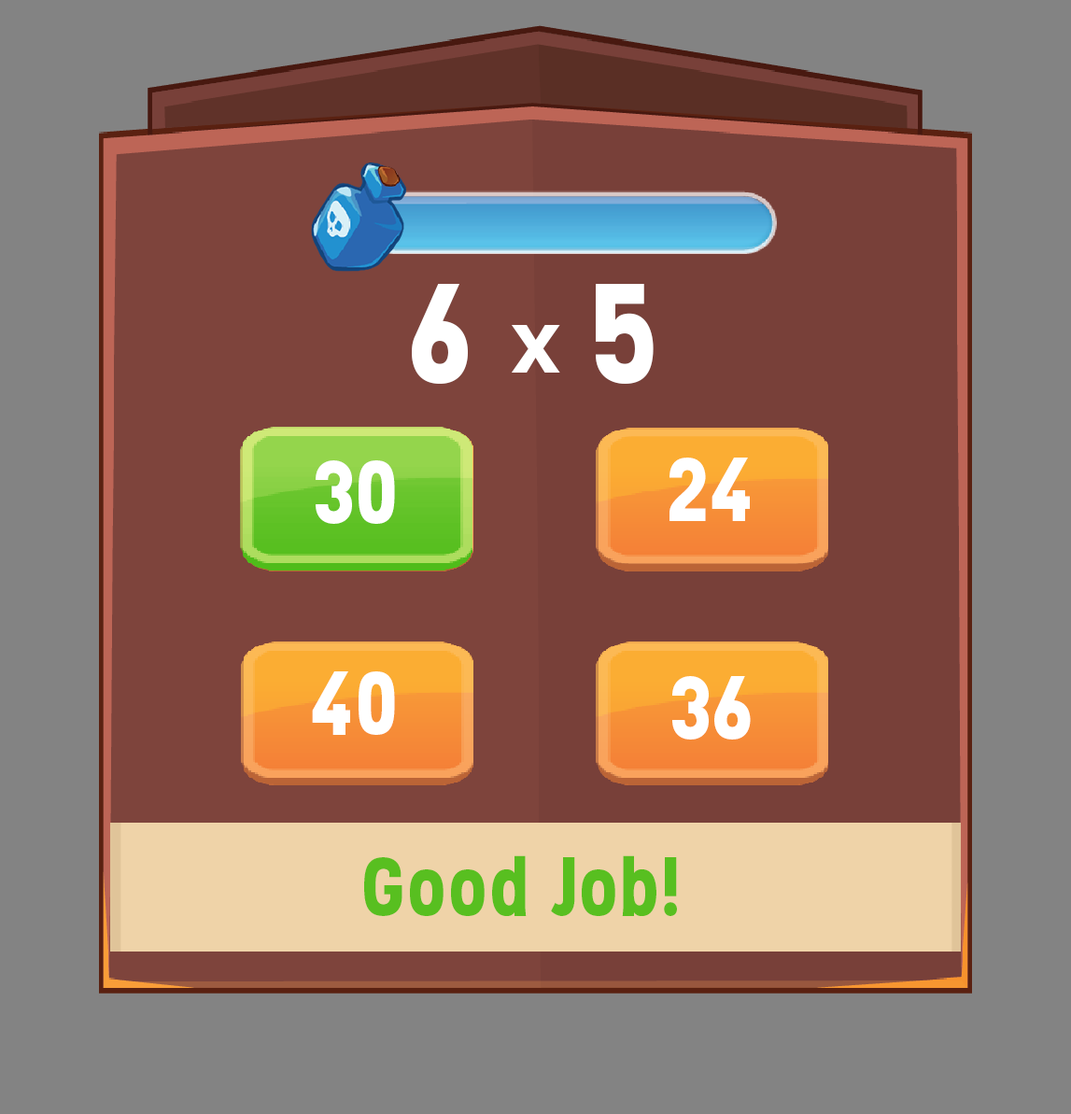
<style>
.page{position:relative;width:1071px;height:1114px;background:#838383}
.page>*{position:absolute;margin:0}
.t1{font:141.3px "Stellar-Bold";color:#ffffff}
.t2{font:86.5px "Stellar-Bold";color:#ffffff;scale:1.12 1}
.t3{font:90.2px "Stellar-Bold";color:#ffffff}
.t4{font:83.5px "Stellar-Bold";color:#58bf20}
</style>
<div class="page">
<p class="t1" style="left:412px;top:284px;width:241px;height:100px">6 <span class="t2">x </span>5</p>
<p class="t3" style="left:316px;top:460px;width:79px;height:64px">30</p>
<p class="t3" style="left:669px;top:457px;width:81px;height:64px">24</p>
<p class="t3" style="left:312px;top:671px;width:83px;height:64px">40</p>
<p class="t3" style="left:672px;top:676px;width:79px;height:63px">36</p>
<p class="t4" style="left:364px;top:855px;width:313px;height:61px">Good Job!</p>
</div>
